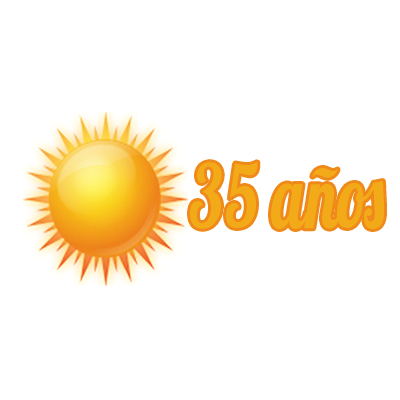
<style>
.page{position:relative;width:400px;height:400px;background:#ffffff}
.page>*{position:absolute;margin:0}
.t1{font:88px "Lobster1.4";color:#f3aa18;scale:0.73 1}
</style>
<div class="page">
<p class="t1" style="left:190px;top:162px;width:194px;height:67px">35 años</p>
</div>
